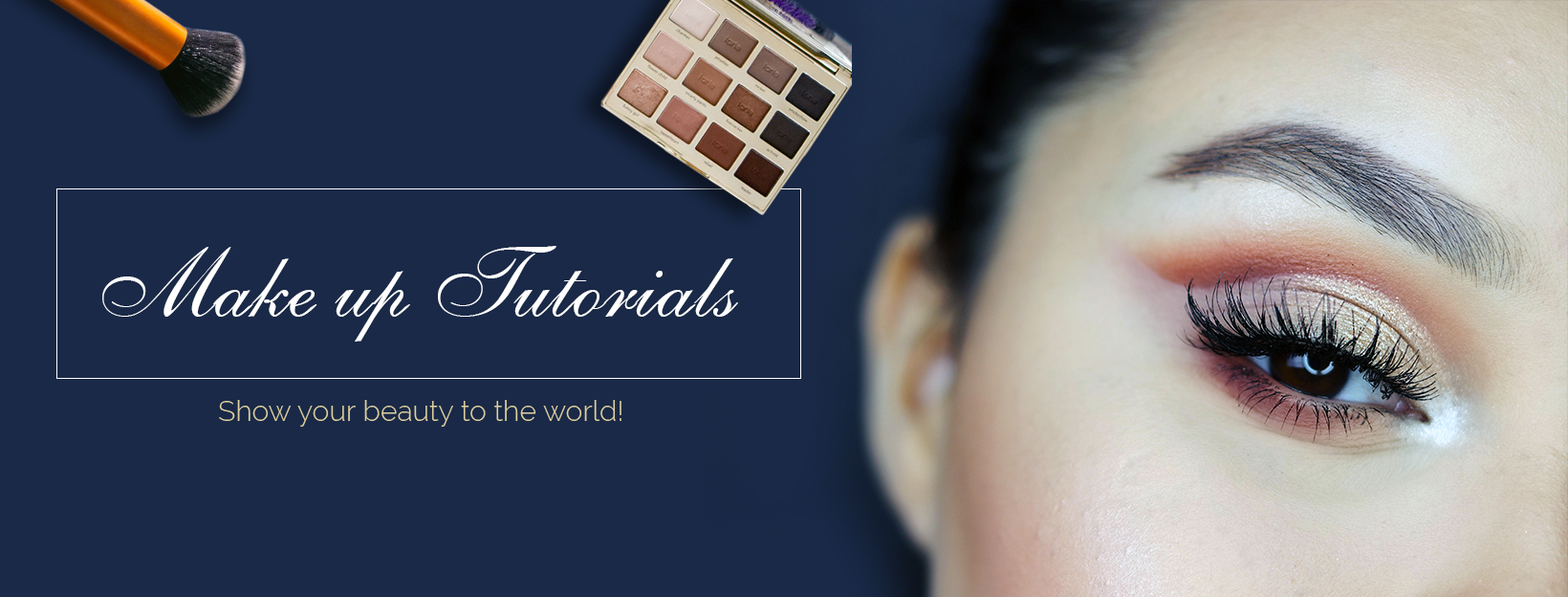
<style>
.page{position:relative;width:1568px;height:597px;background:#192947}
.page>*{position:absolute;margin:0}
.t1{font:95.6px "ShelleyAllegroBT-Regular";color:#ffffff}
.t2{font:28.7px "Raleway-Light";color:#decf9d}
</style>
<div class="page">
<p class="t1" style="left:102px;top:246px;width:636px;height:95px">Make up Tutorials</p>
<p class="t2" style="left:219px;top:400px;width:402px;height:26px">Show your beauty to the world!</p>
</div>
